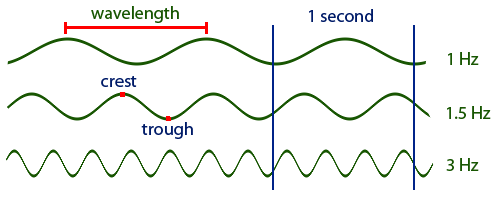
<style>
.page{position:relative;width:500px;height:200px;background:#ffffff}
.page>*{position:absolute;margin:0}
.t1{font:18px "MyriadPro-Regular";color:#185602}
.t2{font:18px "MyriadPro-Regular";color:#001b68}
</style>
<div class="page">
<p class="t1" style="left:91px;top:6px;width:88px;height:17px">wavelength</p>
<p class="t2" style="left:309px;top:9px;width:64px;height:13px">1 second</p>
<p class="t1" style="left:448px;top:52px;width:31px;height:13px">1 Hz</p>
<p class="t2" style="left:101px;top:76px;width:36px;height:11px">crest</p>
<p class="t1" style="left:447px;top:106px;width:44px;height:13px">1.5 Hz</p>
<p class="t2" style="left:141px;top:122px;width:52px;height:17px">trough</p>
<p class="t1" style="left:446px;top:158px;width:33px;height:13px">3 Hz</p>
</div>
